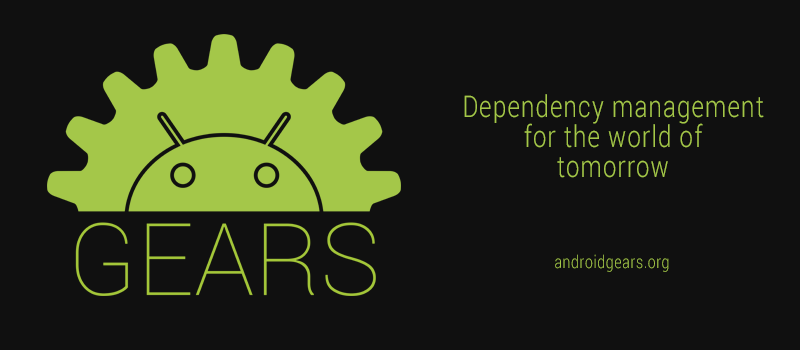
<style>
.page{position:relative;width:800px;height:350px;background:#101010}
.page>*{position:absolute;margin:0}
.t1{font:30px/30px "Roboto-Light";letter-spacing:0.05em;color:#a4c749;scale:0.8 1}
.t2{font:17.5px "Roboto-Light";letter-spacing:0.05em;color:#a4c749;scale:0.8 1}
</style>
<div class="page">
<p class="t1" style="left:464px;top:94px;width:300px;height:84px;text-align:center">Dependency management for the world of <br>tomorrow</p>
<p class="t2" style="left:555px;top:254px;width:114px;height:18px">androidgears.org</p>
</div>
